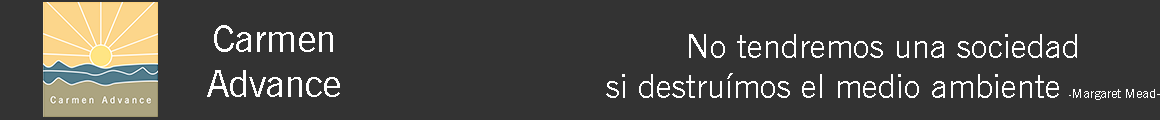
<style>
.page{position:relative;width:1160px;height:120px;background:#333333}
.page>*{position:absolute;margin:0}
.t1{font:37.5px "NewsGothicBT-Roman";color:#ffffff}
.t2{font:33.3px "NewsGothicBT-Roman";color:#ffffff}
.t3{font:8.4px "NewsGothicBT-Roman";color:#ffffff}
.t4{font:12.5px "NewsGothicBT-Roman";color:#ffffff}
</style>
<div class="page">
<p class="t1" style="left:207px;top:25px;width:133px;height:72px;text-align:center">Carmen<br>Advance</p>
<p class="t2" style="left:606px;top:34px;width:554px;height:66px;text-align:center">No tendremos una sociedad<br>si destruímos el medio ambiente <span class="t3">-</span><span class="t4">Margaret Mead-</span></p>
</div>
